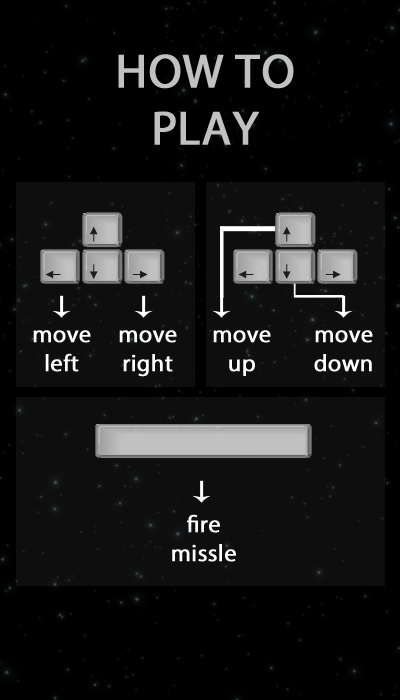
<style>
.page{position:relative;width:400px;height:700px;background:#000000}
.page>*{position:absolute;margin:0}
.t1{font:48px "MyriadPro-Regular";color:#c1c1c1;font-weight:bold}
.t2{font:24px "MyriadPro-Regular";color:#ffffff;font-weight:bold}
</style>
<div class="page">
<p class="t1" style="left:118px;top:54px;width:176px;height:91px;text-align:center">HOW TO PLAY</p>
<p class="t2" style="left:33px;top:330px;width:58px;height:42px;text-align:center">move<br>left</p>
<p class="t2" style="left:119px;top:330px;width:58px;height:47px;text-align:center">move<br>right</p>
<p class="t2" style="left:213px;top:330px;width:58px;height:46px;text-align:center">move<br>up</p>
<p class="t2" style="left:314px;top:330px;width:59px;height:42px;text-align:center">move<br>down</p>
<p class="t2" style="left:172px;top:514px;width:64px;height:48px;text-align:center">fire<br>missle</p>
</div>
